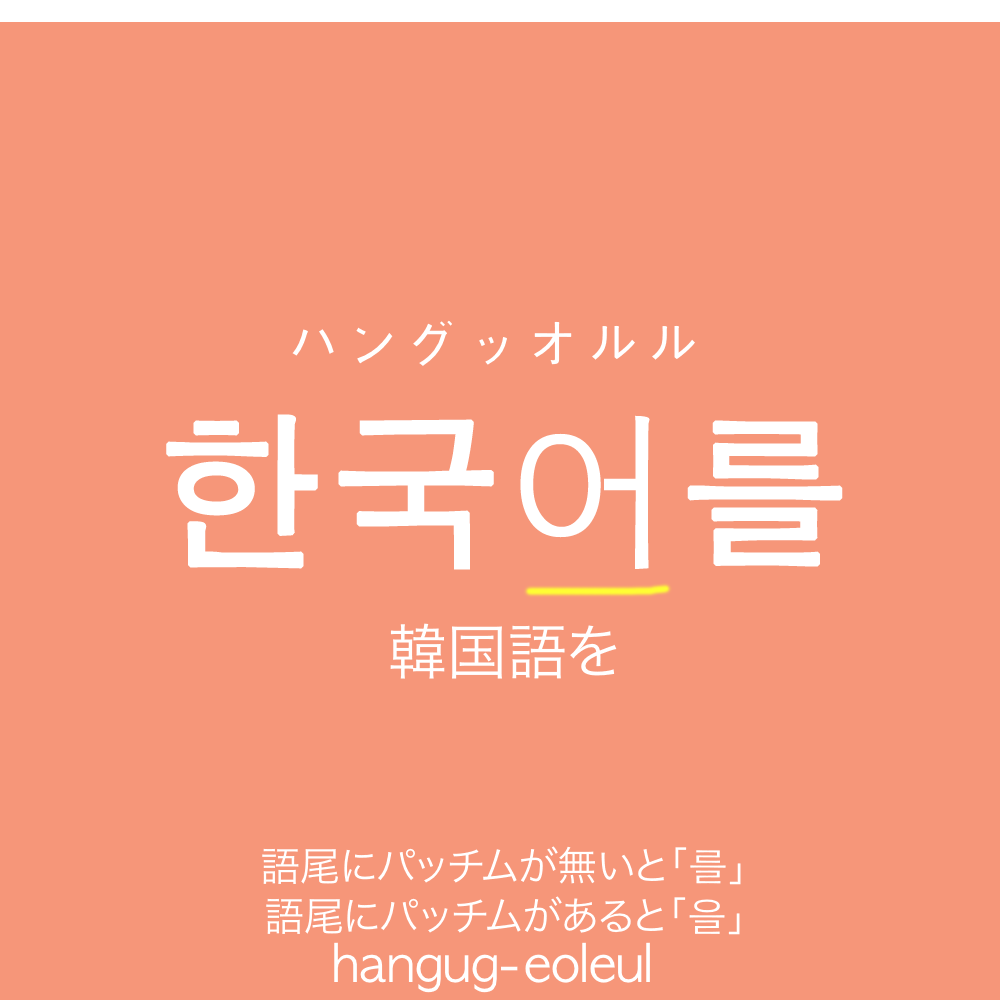
<style>
.page{position:relative;width:1000px;height:1000px;background:#f69679}
.page>*{position:absolute;margin:0}
.t1{font:60px "AppleGothic";color:#ffffff}
.t2{font:170px "AppleGothic";color:#ffffff;font-weight:bold}
.t3{font:60px "HiraKakuProN-W3";color:#ffffff}
.t4{font:40px "HiraKakuProN-W3";color:#ffffff}
.t5{font:40px "AppleGothic";color:#ffffff}
</style>
<div class="page">
<p class="t1" style="left:292px;top:320px;width:403px;height:46px">ハングッオルル</p>
<p class="t2" style="left:166px;top:414px;width:677px;height:156px">한국어를</p>
<p class="t3" style="left:390px;top:623px;width:227px;height:56px">韓国語を</p>
<p class="t4" style="left:262px;top:846px;width:479px;height:39px">語尾にパッチムが無いと「<span class="t5">를</span>」</p>
<p class="t4" style="left:266px;top:896px;width:474px;height:39px">語尾にパッチムがあると「<span class="t5">을</span>」</p>
</div>
